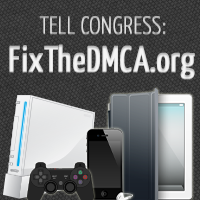
<style>
.page{position:relative;width:200px;height:200px}
.page>*{position:absolute;margin:0}
.t1{font:24px "YanoneKaffeesatz-Thin";color:#dbdbdb;text-transform:uppercase;font-weight:bold}
.t2{font:36px "YanoneKaffeesatz-Regular";color:#ffffff;font-weight:bold}
</style>
<div class="page">
<p class="t1" style="left:39px;top:16px;width:127px;height:18px">Tell Congress:</p>
<p class="t2" style="left:9px;top:44px;width:186px;height:35px;opacity:0.93">FixTheDMCA.org</p>
</div>
